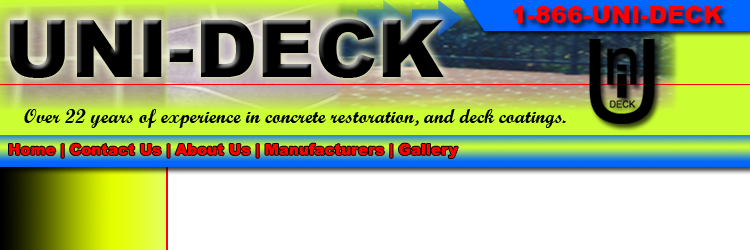
<style>
.page{position:relative;width:750px;height:250px;background:#ffffff}
.page>*{position:absolute;margin:0}
.t1{font:24px "Arial-Black";color:#ff0000}
.t2{font:80px "Arial-Black";color:#000000}
.t3{font:20px "ScriptMTBold";color:#000000}
.t4{font:15px "Arial-Black";color:#ff0000}
</style>
<div class="page">
<p class="t1" style="left:513px;top:6px;width:210px;height:17px">1-866-UNI-DECK</p>
<p class="t2" style="left:9px;top:19px;width:435px;height:59px">UNI-DECK</p>
<p class="t3" style="left:24px;top:109px;width:542px;height:19px">Over 22 years of experience in concrete restoration, and deck coatings.</p>
<p class="t4" style="left:9px;top:143px;width:449px;height:15px">Home | Contact Us | About Us | Manufacturers | Gallery</p>
</div>
